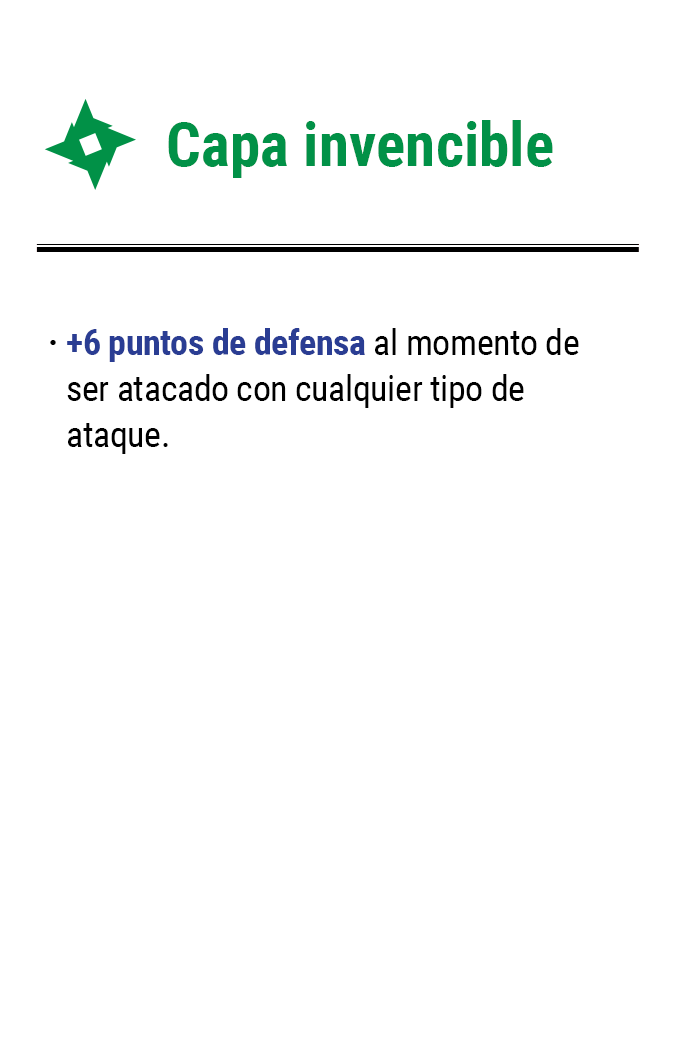
<style>
.page{position:relative;width:675px;height:1050px;background:#ffffff}
.page>*{position:absolute;margin:0}
.t1{font:61.2px "RobotoCondensed-Bold";color:#019147}
.t2{font:35.8px/45.8px "RobotoCondensed-Regular";letter-spacing:-0.01em;color:#000000}
.t3{font:35.8px/45.8px "RobotoCondensed-Bold";letter-spacing:-0.01em;color:#2a3d93}
.t4{font:35.8px "RobotoCondensed-Bold";letter-spacing:-0.01em;color:#000000}
</style>
<div class="page">
<p class="t1" style="left:168px;top:120px;width:385px;height:58px">Capa invencible</p>
<p class="t2" style="left:67px;top:328px;width:512px;height:126px"><span class="t3">+6 puntos de defensa</span> al momento de ser atacado con cualquier tipo de ataque.</p>
<p class="t4" style="left:50px;top:340px;width:6px;height:5px">·</p>
</div>
